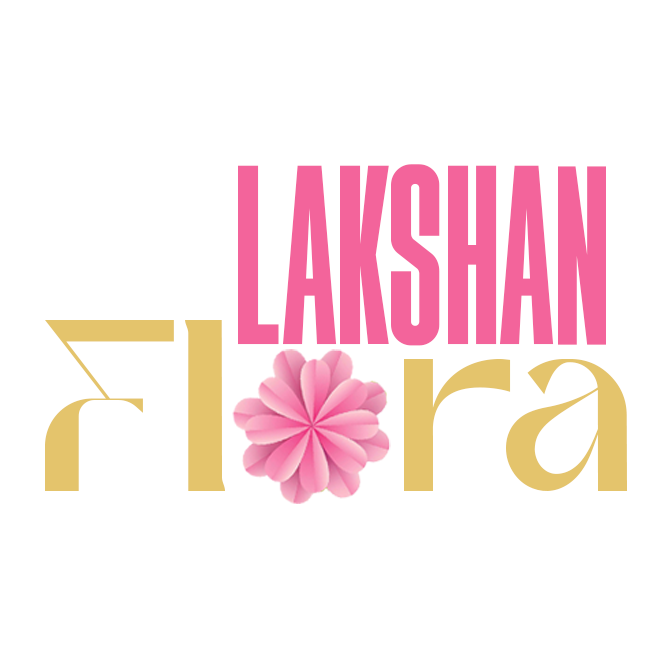
<style>
.page{position:relative;width:668px;height:668px;background:#ffffff}
.page>*{position:absolute;margin:0}
.t1{font:255.9px "HighriseDemoCondensed";color:#f3649b}
.t2{font:258.7px "Sinosans";letter-spacing:-0.02em;color:#e4c46c}
</style>
<div class="page">
<p class="t1" style="left:238px;top:164px;width:368px;height:182px">LAKSHAN</p>
<p class="t2" style="left:45px;top:320px;width:582px;height:171px">Fl   ra</p>
</div>
